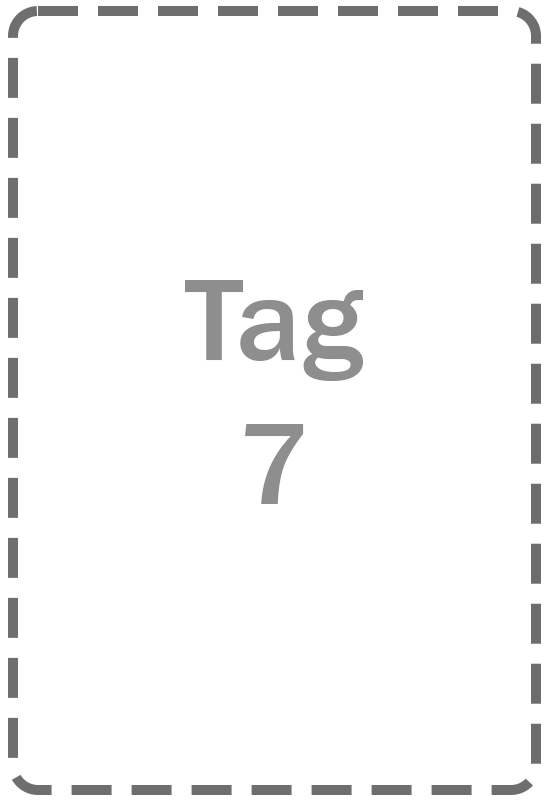
<style>
.page{position:relative;width:548px;height:800px;background:#ffffff}
.page>*{position:absolute;margin:0}
.t1{font:120px "FranklinGothic-Medium";color:#8e8e8e}
</style>
<div class="page">
<p class="t1" style="left:185px;top:280px;width:179px;height:224px;text-align:center">Tag<br>7</p>
</div>
